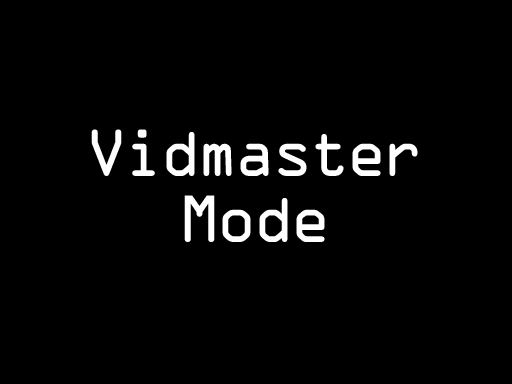
<style>
.page{position:relative;width:512px;height:384px;background:#000000}
.page>*{position:absolute;margin:0}
.t1{font:59.8px/16.6px "OCRAStd";letter-spacing:-0.1em;color:#ffffff}
</style>
<div class="page">
<p class="t1" style="left:91px;top:129px;width:327px;height:113px;text-align:center">Vidmaster<br><br><br><br>Mode</p>
</div>
